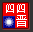
<style>
.page{position:relative;width:33px;height:32px;background:#f20000}
.page>*{position:absolute;margin:0}
.t1{font:10.4px "SimSun";color:#ffffff}
.t2{font:11.7px "SimSun";color:#ffffff}
</style>
<div class="page">
<p class="t1" style="left:6px;top:4px;width:19px;height:9px">四四</p>
<p class="t2" style="left:16px;top:15px;width:11px;height:12px">晋</p>
</div>
